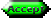
<style>
.page{position:relative;width:52px;height:18px;background:#ffffff}
.page>*{position:absolute;margin:0}
.t1{font:10px "LucidaSansUnicode";font-weight:bold}
</style>
<div class="page">
<p class="t1" style="left:7px;top:5px;width:37px;height:9px">Accept</p>
</div>
